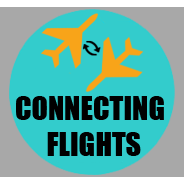
<style>
.page{position:relative;width:184px;height:184px;background:#33cccc}
.page>*{position:absolute;margin:0}
.t1{font:30px "Impact";color:#000000}
</style>
<div class="page">
<p class="t1" style="left:16px;top:96px;width:148px;height:60px">CONNECTING <br>      FLIGHTS</p>
</div>
